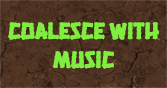
<style>
.page{position:relative;width:167px;height:88px}
.page>*{position:absolute;margin:0}
.t1{font:24px "HanaleiFill-Regular";color:#80ed40}
</style>
<div class="page">
<p class="t1" style="left:8px;top:21px;width:151px;height:48px;text-align:center">COALESCE WITH<br>MUSIC</p>
</div>
